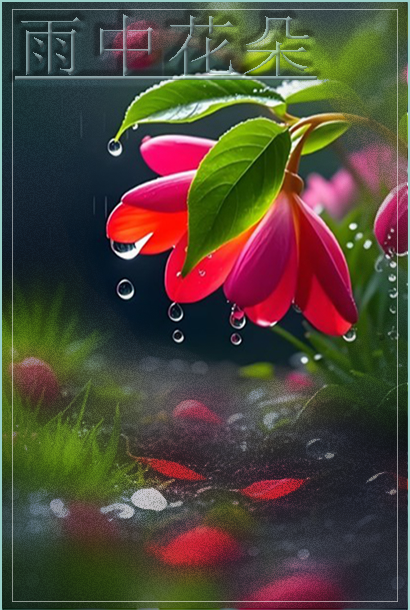
<style>
.page{position:relative;width:410px;height:610px}
.page>*{position:absolute;margin:0}
.t1{font:67.9px "SimSun";letter-spacing:0.05em;text-decoration:underline;scale:1.05 1}
</style>
<div class="page">
<p class="t1" style="left:15px;top:14px;width:302px;height:66px">雨中花朵</p>
</div>
